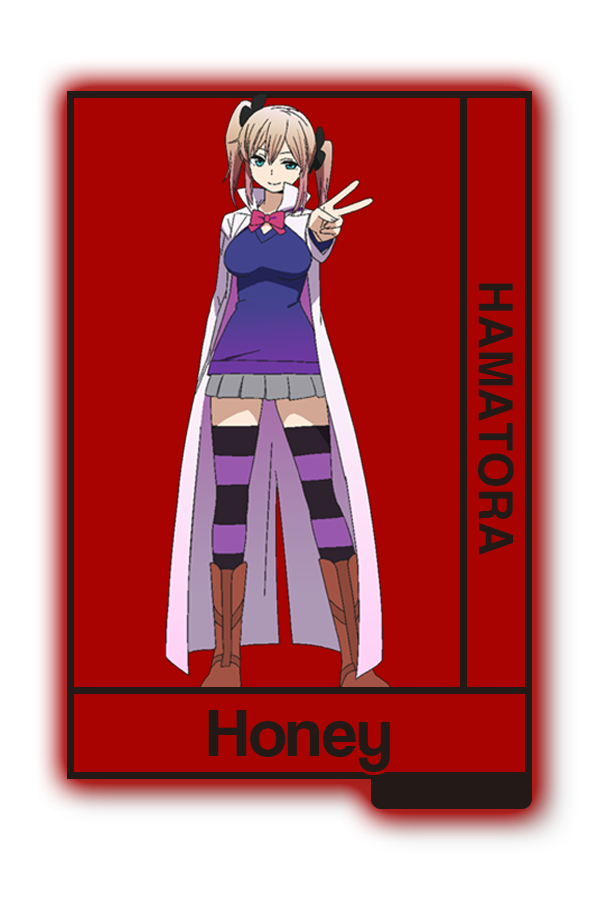
<style>
.page{position:relative;width:600px;height:900px;background:#a80301}
.page>*{position:absolute;margin:0}
.t1{font:47.4px "Helvetica-Bold";color:#231917}
.t2{font:70.1px "CoolveticaRg-Regular";color:#231917}
</style>
<div class="page">
<p class="t1" style="left:478px;top:283px;width:36px;height:272px;rotate:90deg">HAMATORA</p>
<p class="t2" style="left:208px;top:710px;width:182px;height:62px">Honey</p>
</div>
